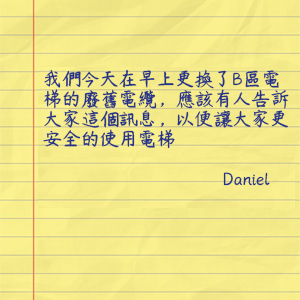
<style>
.page{position:relative;width:300px;height:300px}
.page>*{position:absolute;margin:0}
.t1{font:19px/20px "YRDZSTJF";color:#253389}
</style>
<div class="page">
<p class="t1" style="left:43px;top:69px;width:246px;height:117px">我們今天在早上更換了B區電<br>梯的廢舊電纜，應該有人告訴<br>大家這個訊息，以便讓大家更<br>安全的使用電梯<br><br>     Daniel</p>
</div>
